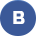
<style>
.page{position:relative;width:36px;height:36px;background:#3b5998}
.page>*{position:absolute;margin:0}
.t1{font:18px "RussoOne";color:#ffffff}
</style>
<div class="page">
<p class="t1" style="left:13px;top:11px;width:12px;height:13px">B</p>
</div>
